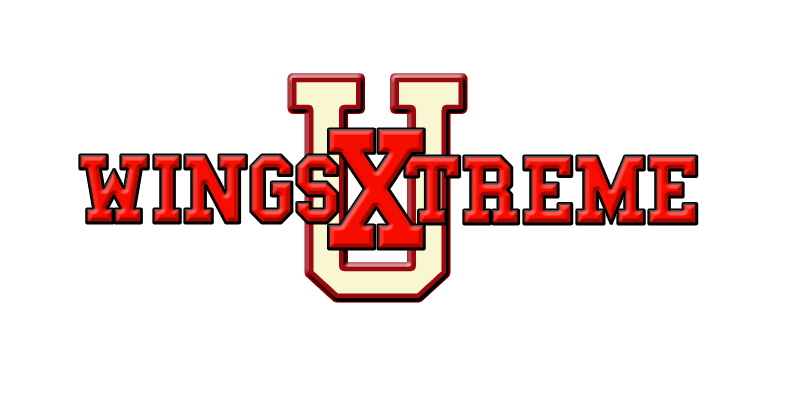
<style>
.page{position:relative;width:800px;height:400px;background:#ffffff}
.page>*{position:absolute;margin:0}
.t1{font:321.1px "College";color:#f9f8d2;scale:1.09 1}
.t2{font:175px "CollegeBold";color:#f70d01}
.t3{font:100px "CollegeBold";letter-spacing:-0.05em;color:#f70d01}
</style>
<div class="page">
<p class="t1" style="left:292px;top:77px;width:171px;height:221px">U</p>
<p class="t2" style="left:328px;top:129px;width:97px;height:120px">X</p>
<p class="t3" style="left:79px;top:155px;width:259px;height:68px">WINGS</p>
<p class="t3" style="left:404px;top:156px;width:293px;height:68px">TREME</p>
</div>
